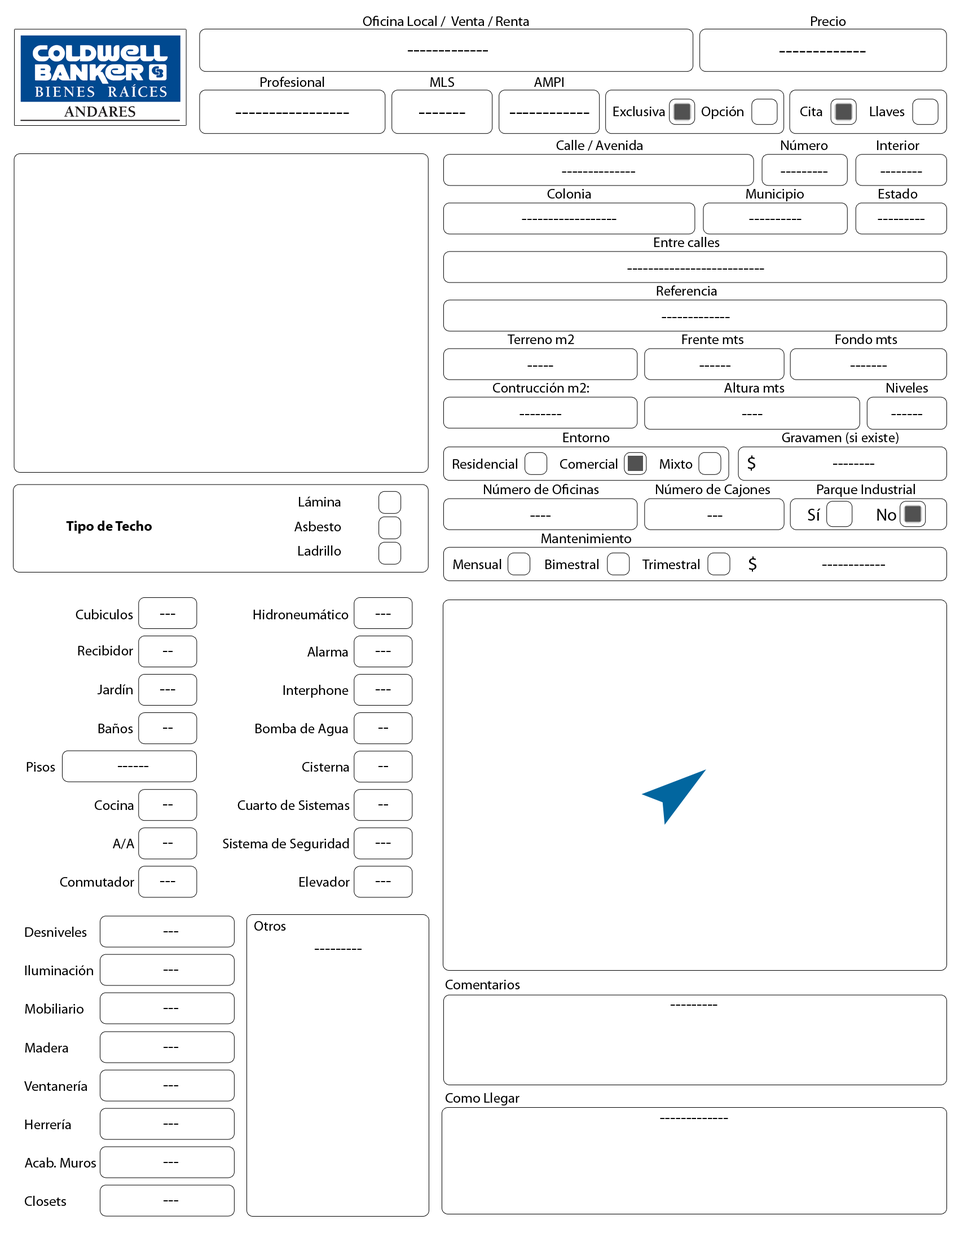
<style>
.page{position:relative;width:960px;height:1242px;background:#ffffff}
.page>*{position:absolute;margin:0}
.t1{font:14.1px "MyriadPro-Regular";color:#000000}
.t2{font:20.4px "MyriadPro-Regular";color:#000000}
.t3{font:21.9px "MyriadPro-Regular";color:#000000}
.t4{font:17.3px "MyriadPro-Regular";color:#000000}
.t5{font:17.2px "MyriadPro-Regular";color:#000000}
.t6{font:18.8px "MyriadPro-Regular";color:#000000}
.t7{font:14.1px "MyriadPro-Bold";color:#000000}
</style>
<div class="page">
<p class="t1" style="left:363px;top:16px;width:166px;height:11px">Oficina Local /  Venta / Renta</p>
<p class="t1" style="left:811px;top:16px;width:35px;height:10px">Precio</p>
<p class="t2" style="left:408px;top:50px;width:80px;height:2px">-------------</p>
<p class="t3" style="left:780px;top:51px;width:86px;height:1px">-------------</p>
<p class="t1" style="left:261px;top:77px;width:63px;height:10px">Profesional</p>
<p class="t1" style="left:430px;top:77px;width:24px;height:10px">MLS</p>
<p class="t1" style="left:534px;top:77px;width:30px;height:10px">AMPI</p>
<p class="t3" style="left:236px;top:112px;width:113px;height:2px">-----------------</p>
<p class="t3" style="left:419px;top:112px;width:46px;height:2px">-------</p>
<p class="t3" style="left:510px;top:112px;width:79px;height:2px">------------</p>
<p class="t1" style="left:613px;top:106px;width:52px;height:10px">Exclusiva</p>
<p class="t1" style="left:702px;top:106px;width:41px;height:13px">Opción</p>
<p class="t1" style="left:800px;top:107px;width:22px;height:9px">Cita</p>
<p class="t1" style="left:870px;top:106px;width:35px;height:10px">Llaves</p>
<p class="t1" style="left:556px;top:140px;width:87px;height:11px">Calle / Avenida</p>
<p class="t1" style="left:781px;top:140px;width:47px;height:10px">Número</p>
<p class="t1" style="left:877px;top:140px;width:42px;height:10px">Interior</p>
<p class="t4" style="left:562px;top:171px;width:73px;height:2px">--------------</p>
<p class="t4" style="left:781px;top:171px;width:46px;height:2px">---------</p>
<p class="t4" style="left:881px;top:171px;width:41px;height:2px">--------</p>
<p class="t1" style="left:547px;top:188px;width:44px;height:11px">Colonia</p>
<p class="t1" style="left:746px;top:189px;width:58px;height:12px">Municipio</p>
<p class="t1" style="left:879px;top:188px;width:39px;height:11px">Estado</p>
<p class="t5" style="left:522px;top:219px;width:95px;height:1px">------------------</p>
<p class="t4" style="left:749px;top:219px;width:53px;height:1px">----------</p>
<p class="t4" style="left:878px;top:219px;width:47px;height:1px">---------</p>
<p class="t1" style="left:654px;top:237px;width:66px;height:10px">Entre calles</p>
<p class="t4" style="left:627px;top:268px;width:137px;height:2px">--------------------------</p>
<p class="t1" style="left:657px;top:285px;width:60px;height:11px">Referencia</p>
<p class="t4" style="left:662px;top:317px;width:68px;height:1px">-------------</p>
<p class="t1" style="left:508px;top:334px;width:66px;height:10px">Terreno m2</p>
<p class="t1" style="left:682px;top:334px;width:61px;height:10px">Frente mts</p>
<p class="t1" style="left:835px;top:334px;width:62px;height:10px">Fondo mts</p>
<p class="t4" style="left:527px;top:366px;width:26px;height:1px">-----</p>
<p class="t4" style="left:699px;top:366px;width:31px;height:1px">------</p>
<p class="t4" style="left:851px;top:366px;width:36px;height:1px">-------</p>
<p class="t1" style="left:493px;top:382px;width:96px;height:11px">Contrucción m2:</p>
<p class="t1" style="left:724px;top:382px;width:61px;height:11px">Altura mts</p>
<p class="t1" style="left:887px;top:382px;width:41px;height:11px">Niveles</p>
<p class="t4" style="left:520px;top:414px;width:41px;height:1px">--------</p>
<p class="t4" style="left:742px;top:414px;width:21px;height:1px">----</p>
<p class="t4" style="left:891px;top:414px;width:31px;height:1px">------</p>
<p class="t1" style="left:563px;top:433px;width:47px;height:9px">Entorno</p>
<p class="t1" style="left:782px;top:432px;width:117px;height:12px">Gravamen (si existe)</p>
<p class="t1" style="left:453px;top:459px;width:64px;height:10px">Residencial</p>
<p class="t1" style="left:560px;top:459px;width:58px;height:10px">Comercial</p>
<p class="t1" style="left:660px;top:459px;width:33px;height:10px">Mixto</p>
<p class="t6" style="left:747px;top:455px;width:8px;height:16px">$</p>
<p class="t4" style="left:833px;top:464px;width:41px;height:1px">--------</p>
<p class="t1" style="left:484px;top:484px;width:115px;height:10px">Número de Oficinas</p>
<p class="t1" style="left:656px;top:484px;width:114px;height:13px">Número de Cajones</p>
<p class="t1" style="left:817px;top:484px;width:98px;height:13px">Parque Industrial</p>
<p class="t1" style="left:299px;top:496px;width:42px;height:11px">Lámina</p>
<p class="t4" style="left:808px;top:508px;width:13px;height:13px">Sí</p>
<p class="t4" style="left:877px;top:509px;width:19px;height:12px">No</p>
<p class="t7" style="left:66px;top:521px;width:86px;height:13px">Tipo de Techo</p>
<p class="t1" style="left:294px;top:521px;width:47px;height:10px">Asbesto</p>
<p class="t4" style="left:530px;top:516px;width:21px;height:1px">----</p>
<p class="t4" style="left:707px;top:516px;width:16px;height:1px">---</p>
<p class="t1" style="left:542px;top:534px;width:89px;height:9px">Mantenimiento</p>
<p class="t1" style="left:298px;top:545px;width:43px;height:11px">Ladrillo</p>
<p class="t6" style="left:749px;top:556px;width:7px;height:16px">$</p>
<p class="t1" style="left:453px;top:559px;width:48px;height:10px">Mensual</p>
<p class="t1" style="left:545px;top:559px;width:53px;height:10px">Bimestral</p>
<p class="t1" style="left:642px;top:559px;width:57px;height:10px">Trimestral</p>
<p class="t4" style="left:822px;top:565px;width:63px;height:1px">------------</p>
<p class="t1" style="left:76px;top:609px;width:57px;height:10px">Cubiculos</p>
<p class="t4" style="left:160px;top:614px;width:15px;height:1px">---</p>
<p class="t1" style="left:253px;top:609px;width:96px;height:10px">Hidroneumático</p>
<p class="t4" style="left:376px;top:614px;width:15px;height:1px">---</p>
<p class="t1" style="left:78px;top:645px;width:55px;height:10px">Recibidor</p>
<p class="t4" style="left:163px;top:651px;width:10px;height:1px">--</p>
<p class="t1" style="left:307px;top:646px;width:41px;height:11px">Alarma</p>
<p class="t4" style="left:376px;top:651px;width:15px;height:1px">---</p>
<p class="t1" style="left:97px;top:684px;width:36px;height:10px">Jardín</p>
<p class="t4" style="left:160px;top:689px;width:15px;height:1px">---</p>
<p class="t1" style="left:283px;top:685px;width:66px;height:13px">Interphone</p>
<p class="t4" style="left:376px;top:689px;width:15px;height:1px">---</p>
<p class="t1" style="left:98px;top:724px;width:35px;height:9px">Baños</p>
<p class="t1" style="left:256px;top:723px;width:92px;height:13px">Bomba de Agua</p>
<p class="t4" style="left:163px;top:728px;width:10px;height:1px">--</p>
<p class="t4" style="left:378px;top:728px;width:10px;height:1px">--</p>
<p class="t1" style="left:27px;top:762px;width:28px;height:10px">Pisos</p>
<p class="t4" style="left:118px;top:766px;width:30px;height:1px">------</p>
<p class="t1" style="left:302px;top:762px;width:47px;height:10px">Cisterna</p>
<p class="t4" style="left:378px;top:766px;width:10px;height:1px">--</p>
<p class="t1" style="left:95px;top:800px;width:39px;height:10px">Cocina</p>
<p class="t4" style="left:163px;top:804px;width:10px;height:1px">--</p>
<p class="t1" style="left:237px;top:800px;width:113px;height:10px">Cuarto de Sistemas</p>
<p class="t4" style="left:378px;top:804px;width:10px;height:1px">--</p>
<p class="t1" style="left:113px;top:839px;width:21px;height:10px">A/A</p>
<p class="t4" style="left:163px;top:843px;width:10px;height:1px">--</p>
<p class="t1" style="left:223px;top:838px;width:126px;height:13px">Sistema de Seguridad</p>
<p class="t4" style="left:376px;top:843px;width:15px;height:1px">---</p>
<p class="t1" style="left:60px;top:877px;width:74px;height:10px">Conmutador</p>
<p class="t4" style="left:160px;top:881px;width:15px;height:1px">---</p>
<p class="t1" style="left:300px;top:877px;width:50px;height:10px">Elevador</p>
<p class="t4" style="left:376px;top:881px;width:15px;height:1px">---</p>
<p class="t1" style="left:25px;top:927px;width:62px;height:10px">Desniveles</p>
<p class="t1" style="left:254px;top:921px;width:32px;height:10px">Otros</p>
<p class="t4" style="left:164px;top:931px;width:14px;height:1px">---</p>
<p class="t4" style="left:315px;top:949px;width:47px;height:1px">---------</p>
<p class="t1" style="left:25px;top:965px;width:68px;height:10px">Iluminación</p>
<p class="t4" style="left:164px;top:970px;width:14px;height:1px">---</p>
<p class="t1" style="left:446px;top:980px;width:74px;height:9px">Comentarios</p>
<p class="t1" style="left:25px;top:1003px;width:58px;height:11px">Mobiliario</p>
<p class="t4" style="left:164px;top:1008px;width:14px;height:1px">---</p>
<p class="t4" style="left:671px;top:1005px;width:46px;height:1px">---------</p>
<p class="t1" style="left:25px;top:1042px;width:43px;height:11px">Madera</p>
<p class="t4" style="left:164px;top:1047px;width:14px;height:1px">---</p>
<p class="t1" style="left:24px;top:1081px;width:63px;height:10px">Ventanería</p>
<p class="t4" style="left:164px;top:1085px;width:14px;height:1px">---</p>
<p class="t1" style="left:446px;top:1093px;width:74px;height:13px">Como Llegar</p>
<p class="t1" style="left:25px;top:1119px;width:46px;height:10px">Herrería</p>
<p class="t4" style="left:660px;top:1118px;width:68px;height:1px">-------------</p>
<p class="t4" style="left:164px;top:1124px;width:14px;height:1px">---</p>
<p class="t1" style="left:25px;top:1157px;width:71px;height:11px">Acab. Muros</p>
<p class="t4" style="left:164px;top:1162px;width:14px;height:1px">---</p>
<p class="t1" style="left:25px;top:1196px;width:41px;height:10px">Closets</p>
<p class="t4" style="left:164px;top:1200px;width:14px;height:1px">---</p>
</div>
